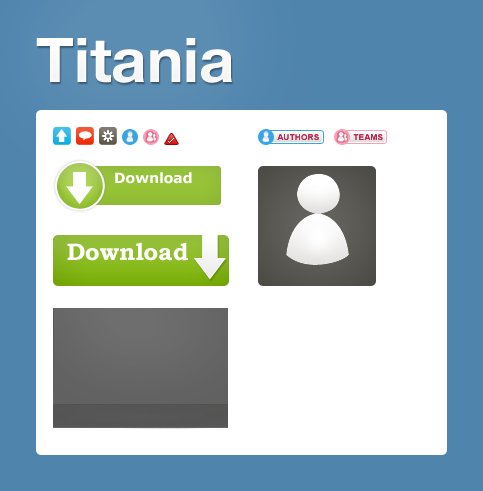
<style>
.page{position:relative;width:483px;height:491px;background:#ffffff}
.page>*{position:absolute;margin:0}
.t1{font:61.6px "HelveticaNeueLTStd-Bd";color:#ffffff}
.t2{font:8px "Arial-BoldMT";letter-spacing:0.05em;color:#bc2a4d;text-transform:uppercase}
.t3{font:14px "Verdana-Bold";color:#ffffff}
.t4{font:24px "BookmanOldStyle-Bold";color:#ffffff}
</style>
<div class="page">
<p class="t1" style="left:36px;top:38px;width:196px;height:45px">Titania</p>
<p class="t2" style="left:277px;top:134px;width:42px;height:6px">AUTHORS</p>
<p class="t2" style="left:353px;top:134px;width:30px;height:6px">TEAMS</p>
<p class="t3" style="left:115px;top:172px;width:77px;height:12px">Download</p>
<p class="t4" style="left:67px;top:242px;width:121px;height:19px">Download</p>
</div>
